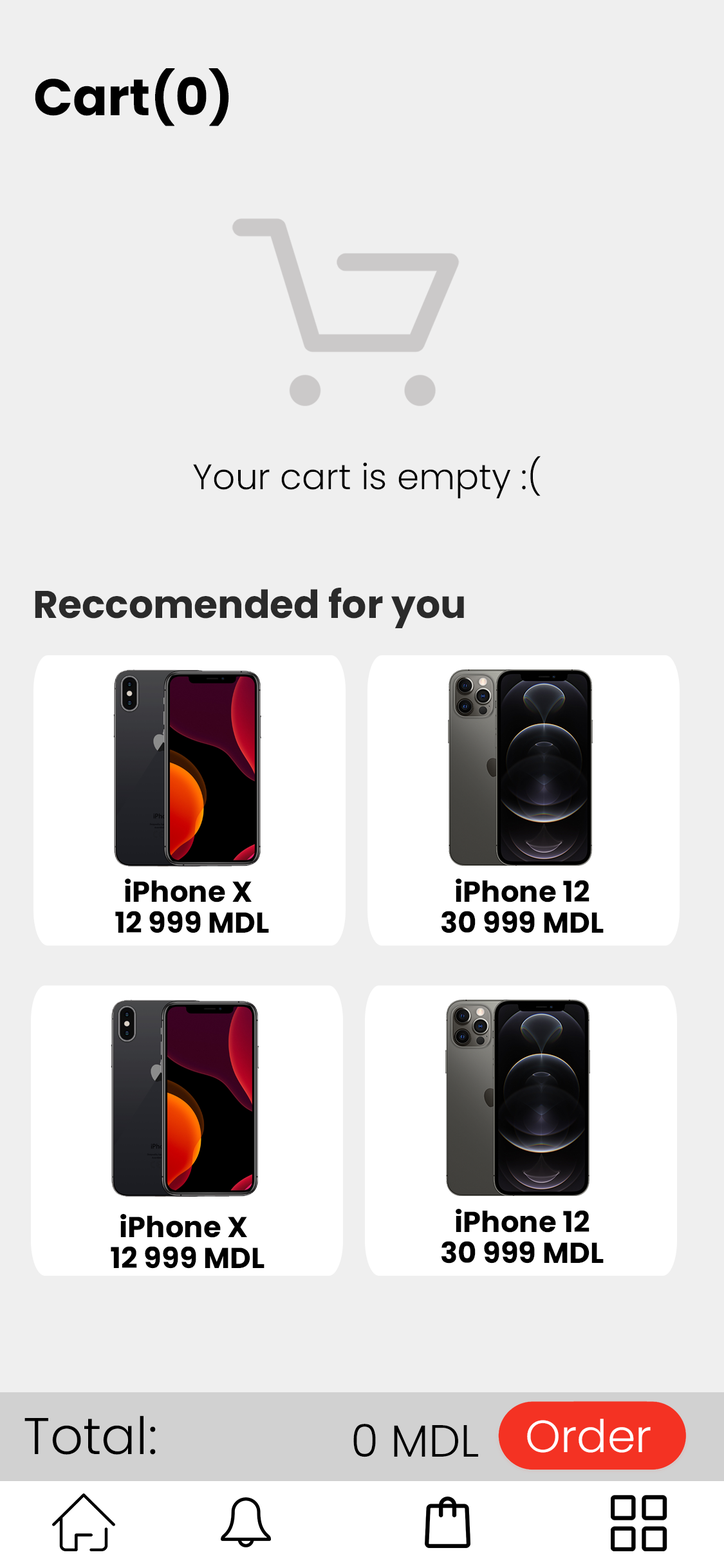
<style>
.page{position:relative;width:724px;height:1568px;background:#efefef}
.page>*{position:absolute;margin:0}
.t1{font:51.5px "Poppins-Bold";color:#000000}
.t2{font:35.4px "Poppins-Light";color:#000000}
.t3{font:38.6px "Poppins-Bold";color:#2a2a2a}
.t4{font:29px "Poppins-Bold";color:#000000}
.t5{font:51.5px "Poppins-Light";color:#000000}
.t6{font:45.1px "Poppins-Light";color:#ffffff}
.t7{font:45.1px "Poppins-Light";color:#000000}
</style>
<div class="page">
<p class="t1" style="left:35px;top:68px;width:194px;height:58px">Cart(0)</p>
<p class="t2" style="left:193px;top:456px;width:348px;height:43px">Your cart is empty :(</p>
<p class="t3" style="left:35px;top:588px;width:429px;height:40px">Reccomended for you</p>
<p class="t4" style="left:125px;top:879px;width:127px;height:23px">iPhone X</p>
<p class="t4" style="left:456px;top:879px;width:134px;height:23px">iPhone 12</p>
<p class="t4" style="left:115px;top:911px;width:154px;height:22px">12 999 MDL</p>
<p class="t4" style="left:442px;top:911px;width:162px;height:22px">30 999 MDL</p>
<p class="t4" style="left:120px;top:1214px;width:127px;height:24px">iPhone X</p>
<p class="t4" style="left:456px;top:1209px;width:134px;height:24px">iPhone 12</p>
<p class="t4" style="left:442px;top:1241px;width:162px;height:23px">30 999 MDL</p>
<p class="t4" style="left:111px;top:1246px;width:154px;height:23px">12 999 MDL</p>
<p class="t5" style="left:24px;top:1415px;width:132px;height:40px">Total:</p>
<p class="t6" style="left:527px;top:1419px;width:124px;height:34px">Order</p>
<p class="t7" style="left:353px;top:1424px;width:125px;height:33px">0 MDL</p>
</div>
